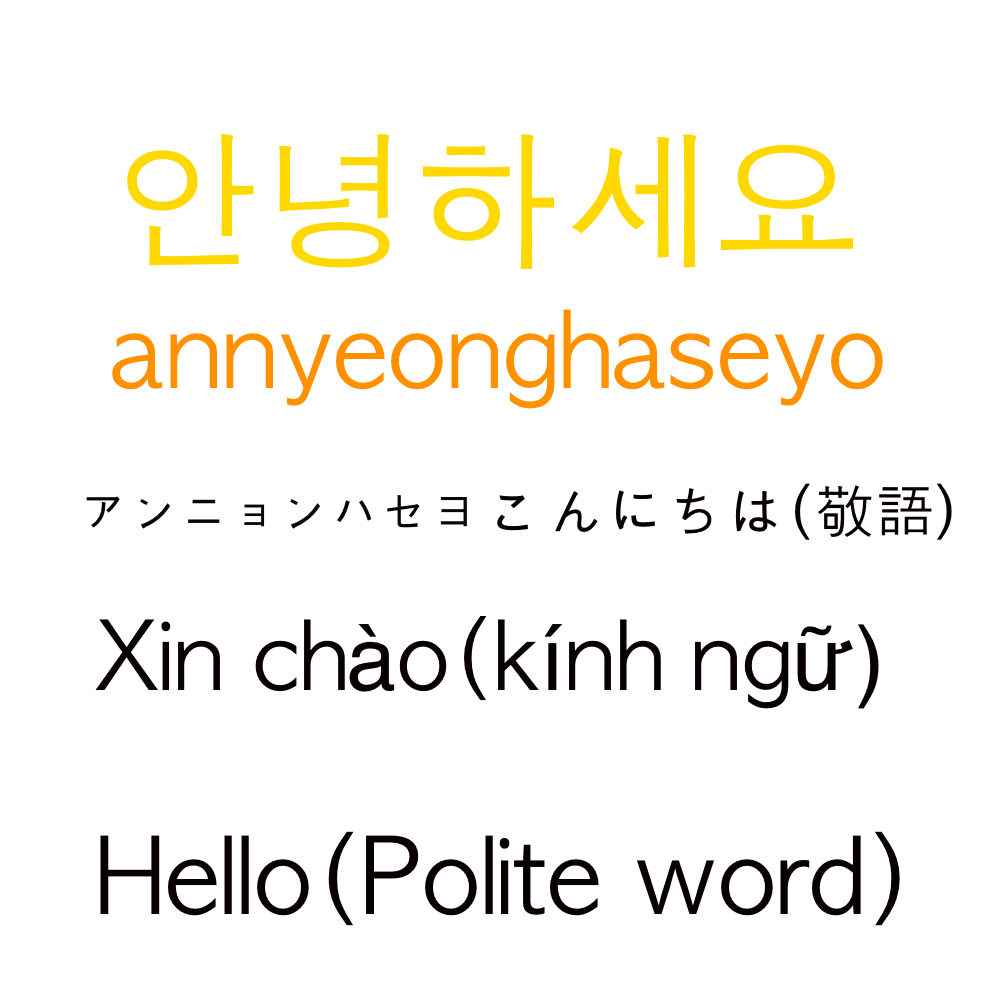
<style>
.page{position:relative;width:1000px;height:1000px;background:#ffffff}
.page>*{position:absolute;margin:0}
.t1{font:150px "AppleGothic";color:#ffd800}
.t2{font:100px "AppleGothic";color:#ff9000}
.t3{font:60px "AppleGothic";color:#080000}
.t4{font:50px "AppleGothic";color:#060605}
.t5{font:90px "AppleGothic";color:#080000}
.t6{font:90px "Helvetica";color:#080000}
.t7{font:100px "AppleGothic";color:#080000}
</style>
<div class="page">
<p class="t1" style="left:127px;top:134px;width:726px;height:135px">안녕하세요</p>
<p class="t2" style="left:112px;top:309px;width:771px;height:100px">annyeonghaseyo</p>
<p class="t3" style="left:497px;top:483px;width:455px;height:57px">こんにちは(敬語）</p>
<p class="t4" style="left:86px;top:495px;width:381px;height:34px">アンニョンハセヨ</p>
<p class="t5" style="left:95px;top:616px;width:784px;height:93px">Xin ch<span class="t6">à</span>o(k<span class="t6">í</span>nh ng<span class="t6">ữ)</span></p>
<p class="t7" style="left:100px;top:831px;width:800px;height:95px">Hello(Polite word)</p>
</div>
